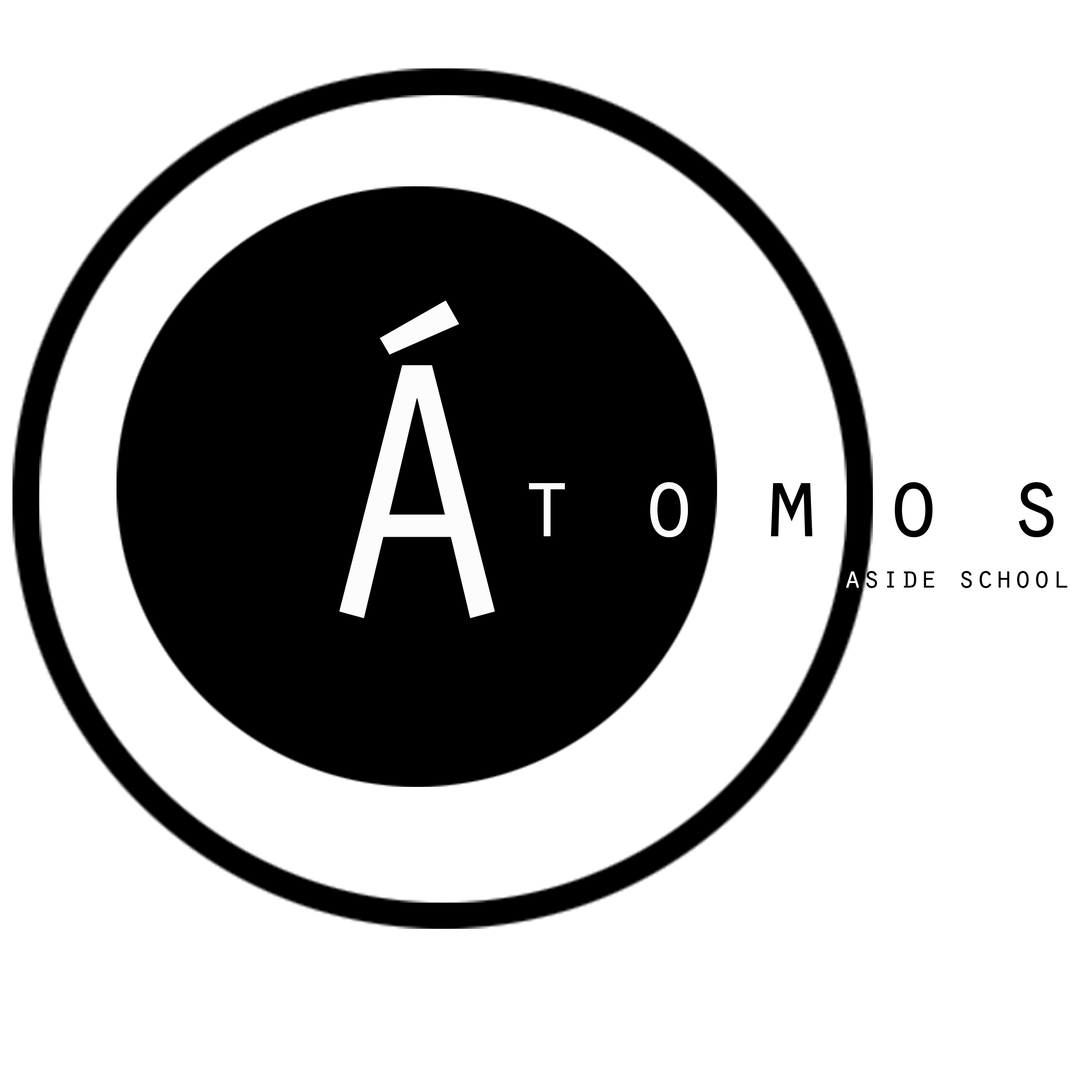
<style>
.page{position:relative;width:1092px;height:1092px;background:#ffffff}
.page>*{position:absolute;margin:0}
.t1{font:372px "OratorStd";color:#fdfcfc}
.t2{font:31.5px "OratorStd";color:#000000}
.t3{font:31.5px "OratorStd";color:#fdfcfc}
</style>
<div class="page">
<p class="t1" style="left:339px;top:301px;width:156px;height:317px">Á</p>
<p class="t2" style="left:846px;top:571px;width:221px;height:17px"><span class="t3">a</span>side school</p>
</div>
